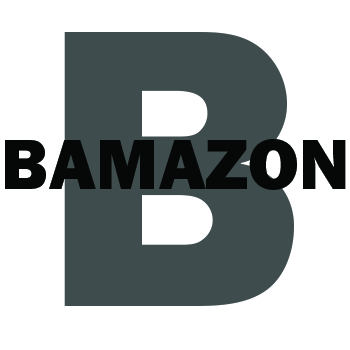
<style>
.page{position:relative;width:350px;height:350px;background:#ffffff}
.page>*{position:absolute;margin:0}
.t1{font:400px "FranklinGothic-Heavy";color:#3f4c4d}
.t2{font:72px "FranklinGothic-Heavy";color:#060808}
</style>
<div class="page">
<p class="t1" style="left:64px;top:32px;width:230px;height:274px">B</p>
<p class="t2" style="left:5px;top:139px;width:341px;height:51px">BAMAZON</p>
</div>
